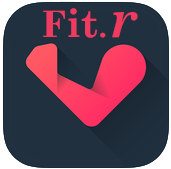
<style>
.page{position:relative;width:171px;height:169px;background:#20303f}
.page>*{position:absolute;margin:0}
.t1{font:40px "CenturySchoolbook-Bold";color:#f03a60}
.t2{font:40px "BodoniMT-Bold";color:#f03a60}
.t3{font:40px "CenturySchoolbook-Italic";color:#f03a60}
.t4{font:53.3px "CenturySchoolbook-BoldItalic";color:#f03a60}
</style>
<div class="page">
<p class="t1" style="left:43px;top:8px;width:95px;height:30px"><span class="t2">F</span>it<span class="t3">.</span><span class="t4">r</span></p>
</div>
